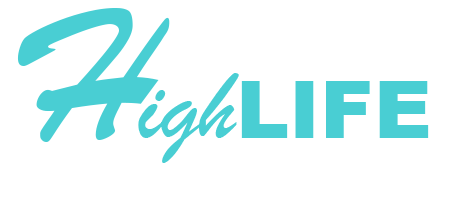
<style>
.page{position:relative;width:451px;height:220px;background:#ffffff}
.page>*{position:absolute;margin:0}
.t1{font:80px "Arial-Black";color:#49ced3}
.t2{font:200px "BrushScriptMT";color:#49ced3}
.t3{font:100px "BrushScriptMT";color:#49ced3}
</style>
<div class="page">
<p class="t1" style="left:17px;top:8px;width:412px;height:155px"><span class="t2">H</span><span class="t3">igh</span>LIFE</p>
</div>
